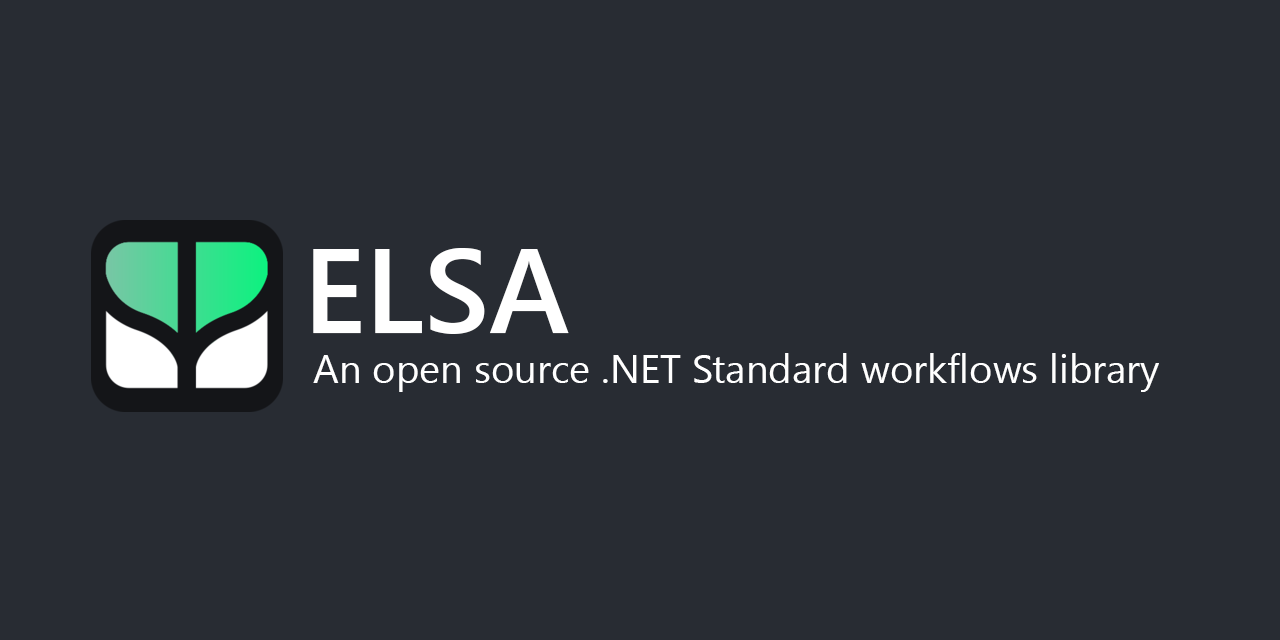
<style>
.page{position:relative;width:1280px;height:640px;background:#282c33}
.page>*{position:absolute;margin:0}
.t1{font:120px "SegoeUI-Semibold";color:#ffffff}
.t2{font:40px "SegoeUI";color:#ffffff}
</style>
<div class="page">
<p class="t1" style="left:313px;top:248px;width:256px;height:86px">ELSA</p>
<p class="t2" style="left:313px;top:353px;width:846px;height:39px">An open source .NET Standard workflows library</p>
</div>
